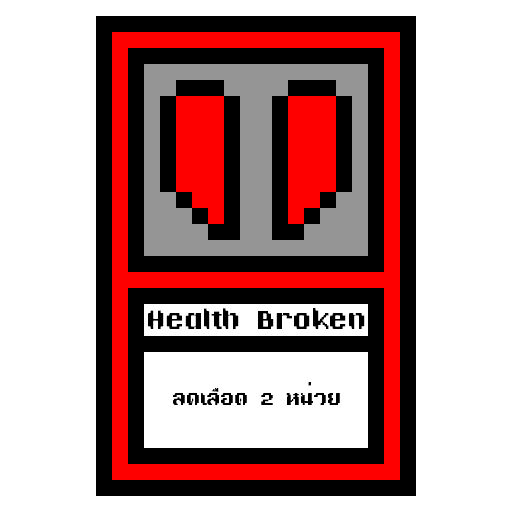
<style>
.page{position:relative;width:512px;height:512px;background:#ffffff}
.page>*{position:absolute;margin:0}
.t1{font:24px "TA16BIT-Regular";color:#000000}
.t2{font:18px "TA16BIT-Regular";color:#000000}
</style>
<div class="page">
<p class="t1" style="left:148px;top:308px;width:217px;height:21px">Health Broken</p>
<p class="t2" style="left:173px;top:382px;width:167px;height:23px">ลดเลือด 2 หน่วย</p>
</div>
